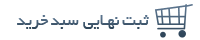
<style>
.page{position:relative;width:200px;height:40px;background:#ffffff}
.page>*{position:absolute;margin:0}
.t1{font:17.7px "BYekan";color:#364b5e}
</style>
<div class="page">
<p class="t1" style="left:17px;top:15px;width:132px;height:14px">ثبت نهـایی سبد خرید</p>
</div>
